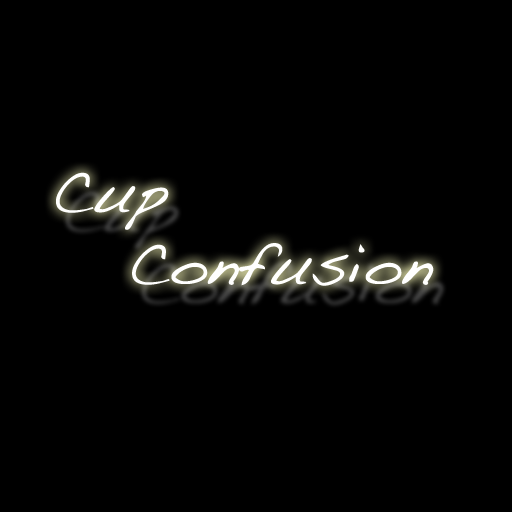
<style>
.page{position:relative;width:512px;height:512px;background:#000000}
.page>*{position:absolute;margin:0}
.t1{font:60px "Handwriting-Dakota";color:#fffffe}
</style>
<div class="page">
<p class="t1" style="left:56px;top:172px;width:378px;height:114px">Cup<br>   Confusion</p>
</div>
